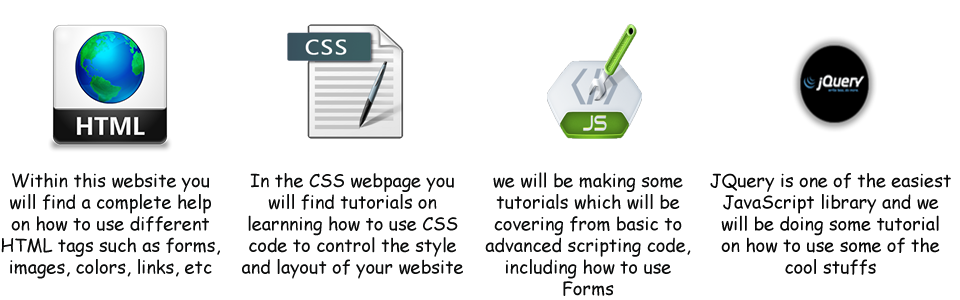
<style>
.page{position:relative;width:960px;height:300px;background:#ffffff}
.page>*{position:absolute;margin:0}
.t1{font:18px "ComicSansMS";color:#0a0b0b}
.t2{font:18px "ComicSansMS";color:#070707}
</style>
<div class="page">
<p class="t1" style="left:1px;top:173px;width:219px;height:106px;text-align:center">Within this website you will find a complete help on how to use different HTML tags such as forms, images, colors, links, etc</p>
<p class="t1" style="left:242px;top:173px;width:221px;height:106px;text-align:center">In the CSS webpage you will find tutorials on learnning how to use CSS code to control the style and layout of your website</p>
<p class="t1" style="left:485px;top:172px;width:206px;height:124px;text-align:center">we will be making some tutorials which will be covering from basic to advanced scripting code, including how to use Forms</p>
<p class="t2" style="left:710px;top:173px;width:241px;height:102px;text-align:center">JQuery is one of the easiest JavaScript library and we will be doing some tutorial on how to use some of the cool stuffs</p>
</div>
